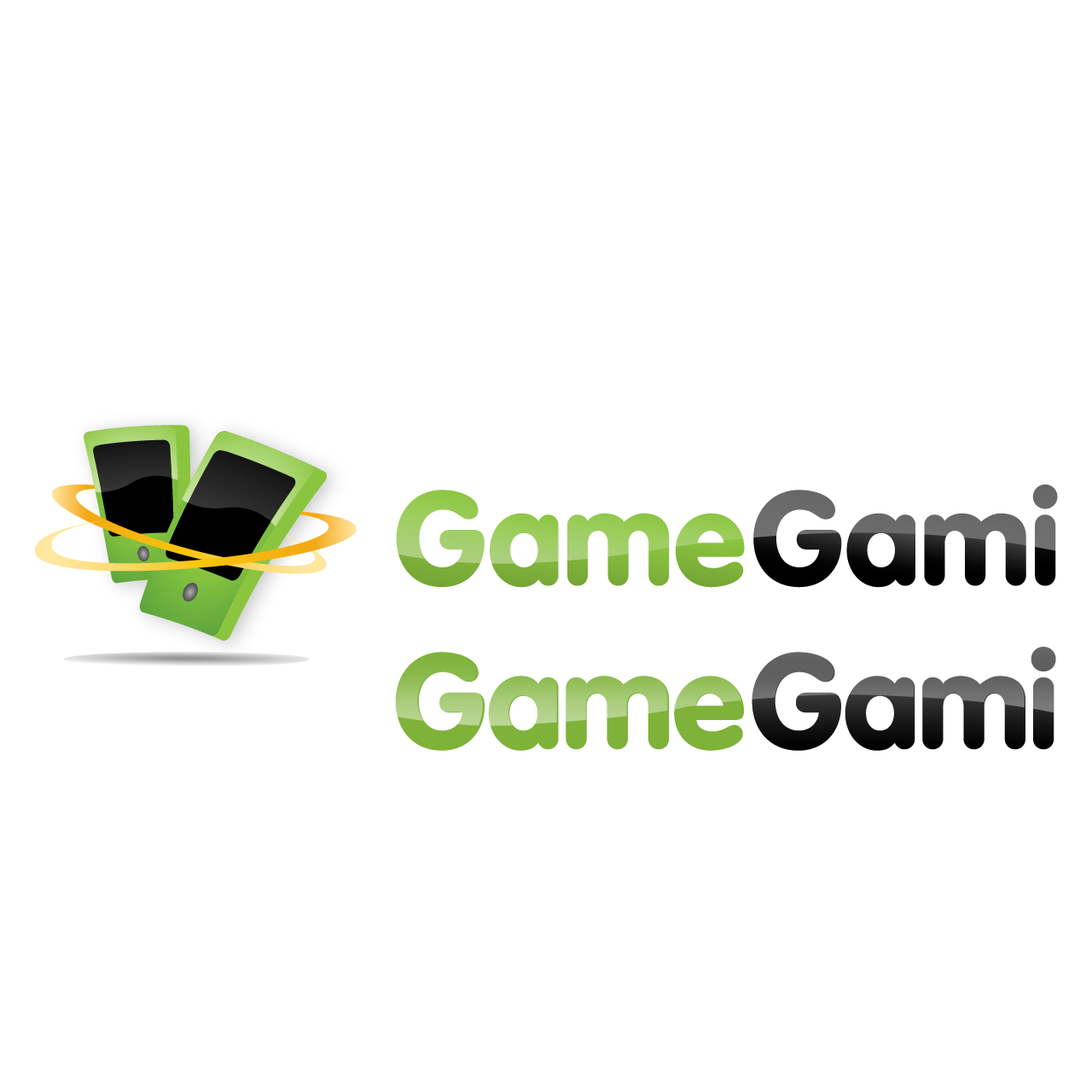
<style>
.page{position:relative;width:1092px;height:1092px;background:#ffffff}
.page>*{position:absolute;margin:0}
.t1{font:132px "VAGRounded-Black";letter-spacing:-0.01em}
</style>
<div class="page">
<p class="t1" style="left:395px;top:652px;width:349px;height:99px">Game</p>
<p class="t1" style="left:752px;top:647px;width:304px;height:104px">Gami</p>
</div>
